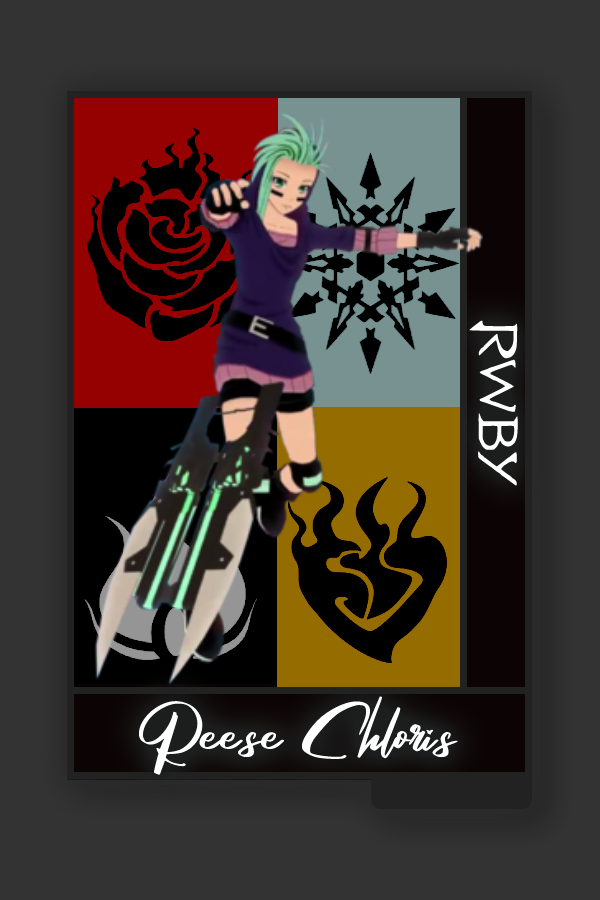
<style>
.page{position:relative;width:600px;height:900px;background:#333333}
.page>*{position:absolute;margin:0}
.t1{font:61.3px "RWBY_Style";color:#ffffff;scale:1.25 1}
.t2{font:76.6px "RosegaFREE";color:#ffffff;scale:0.91 1}
</style>
<div class="page">
<p class="t1" style="left:469px;top:320px;width:49px;height:166px;rotate:90deg">RWBY</p>
<p class="t2" style="left:138px;top:696px;width:320px;height:80px">Reese Chloris</p>
</div>
